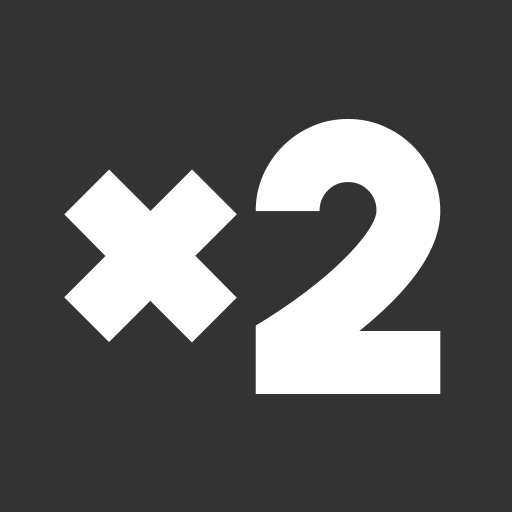
<style>
.page{position:relative;width:512px;height:512px;background:#333333}
.page>*{position:absolute;margin:0}
.t1{font:375px "TheBoldFont";color:#ffffff}
</style>
<div class="page">
<p class="t1" style="left:255px;top:119px;width:186px;height:275px">2</p>
<p class="t1" style="left:64px;top:169px;width:173px;height:174px;rotate:45deg">+</p>
</div>
